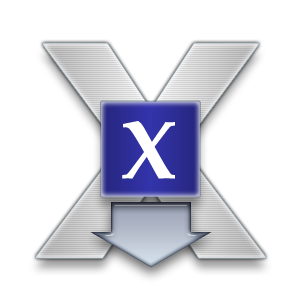
<style>
.page{position:relative;width:300px;height:300px;background:#ffffff}
.page>*{position:absolute;margin:0}
.t1{font:300px "HelveticaNeue-BoldExt";scale:0.92 1}
.t2{font:82.2px "BookAntiqua-Bold";letter-spacing:0.02em;color:#ffffff}
</style>
<div class="page">
<p class="t1" style="left:35px;top:43px;width:231px;height:215px">X</p>
<p class="t2" style="left:122px;top:121px;width:53px;height:58px">X</p>
</div>
